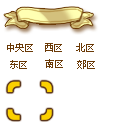
<style>
.page{position:relative;width:128px;height:128px;background:#ffffff}
.page>*{position:absolute;margin:0}
.t1{font:10px "Zfull-GB";letter-spacing:-0.095em;color:#6a3906}
</style>
<div class="page">
<p class="t1" style="left:7px;top:43px;width:26px;height:9px">中央区</p>
<p class="t1" style="left:45px;top:43px;width:17px;height:9px">西区</p>
<p class="t1" style="left:76px;top:43px;width:18px;height:9px">北区</p>
<p class="t1" style="left:10px;top:60px;width:17px;height:9px">东区</p>
<p class="t1" style="left:45px;top:59px;width:18px;height:9px">南区</p>
<p class="t1" style="left:77px;top:60px;width:18px;height:9px">郊区</p>
</div>
